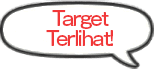
<style>
.page{position:relative;width:154px;height:69px;background:#ffffff}
.page>*{position:absolute;margin:0}
.t1{font:19px/20px "GothicMB101Pro-Medium";letter-spacing:-0.08em;color:#f13738;scale:0.95 1}
</style>
<div class="page">
<p class="t1" style="left:46px;top:10px;width:67px;height:36px;text-align:center">Target<br>Terlihat!</p>
</div>
